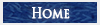
<style>
.page{position:relative;width:100px;height:25px;background:#ededed}
.page>*{position:absolute;margin:0}
.t1{font:14px "TrajanPro3-Regular";color:#ffffff;font-weight:bold;scale:0.84 1}
</style>
<div class="page">
<p class="t1" style="left:32px;top:7px;width:38px;height:12px">Home</p>
</div>
